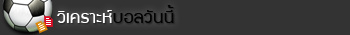
<style>
.page{position:relative;width:350px;height:35px;background:#333333}
.page>*{position:absolute;margin:0}
.t1{font:19.2px "supermarket";color:#ffffff;scale:1.11 1}
.t2{font:19.2px "supermarket";color:#020202;scale:1.11 1}
</style>
<div class="page">
<p class="t1" style="left:57px;top:5px;width:117px;height:18px">วิเคราะห์<span class="t2">บอลวันนี้</span></p>
</div>
